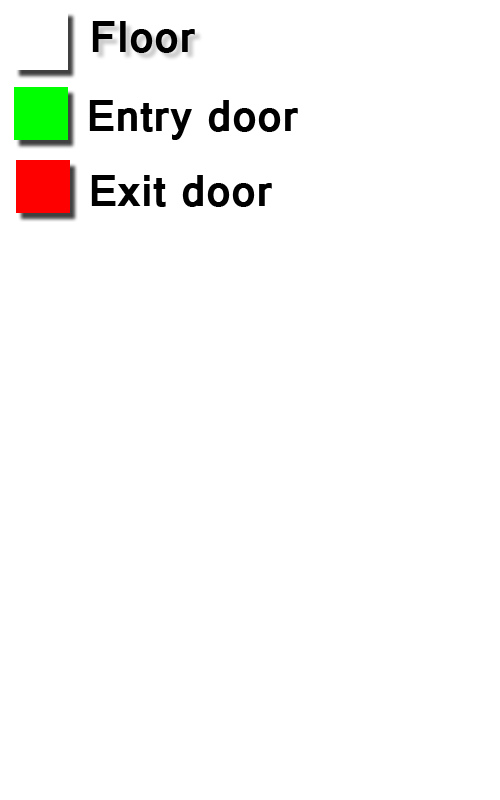
<style>
.page{position:relative;width:500px;height:800px;background:#ffffff}
.page>*{position:absolute;margin:0}
.t1{font:48px "Vrinda-Bold";color:#000000}
</style>
<div class="page">
<p class="t1" style="left:92px;top:21px;width:103px;height:32px">Floor</p>
<p class="t1" style="left:89px;top:100px;width:209px;height:40px">Entry door</p>
<p class="t1" style="left:91px;top:175px;width:181px;height:32px">Exit door</p>
</div>
